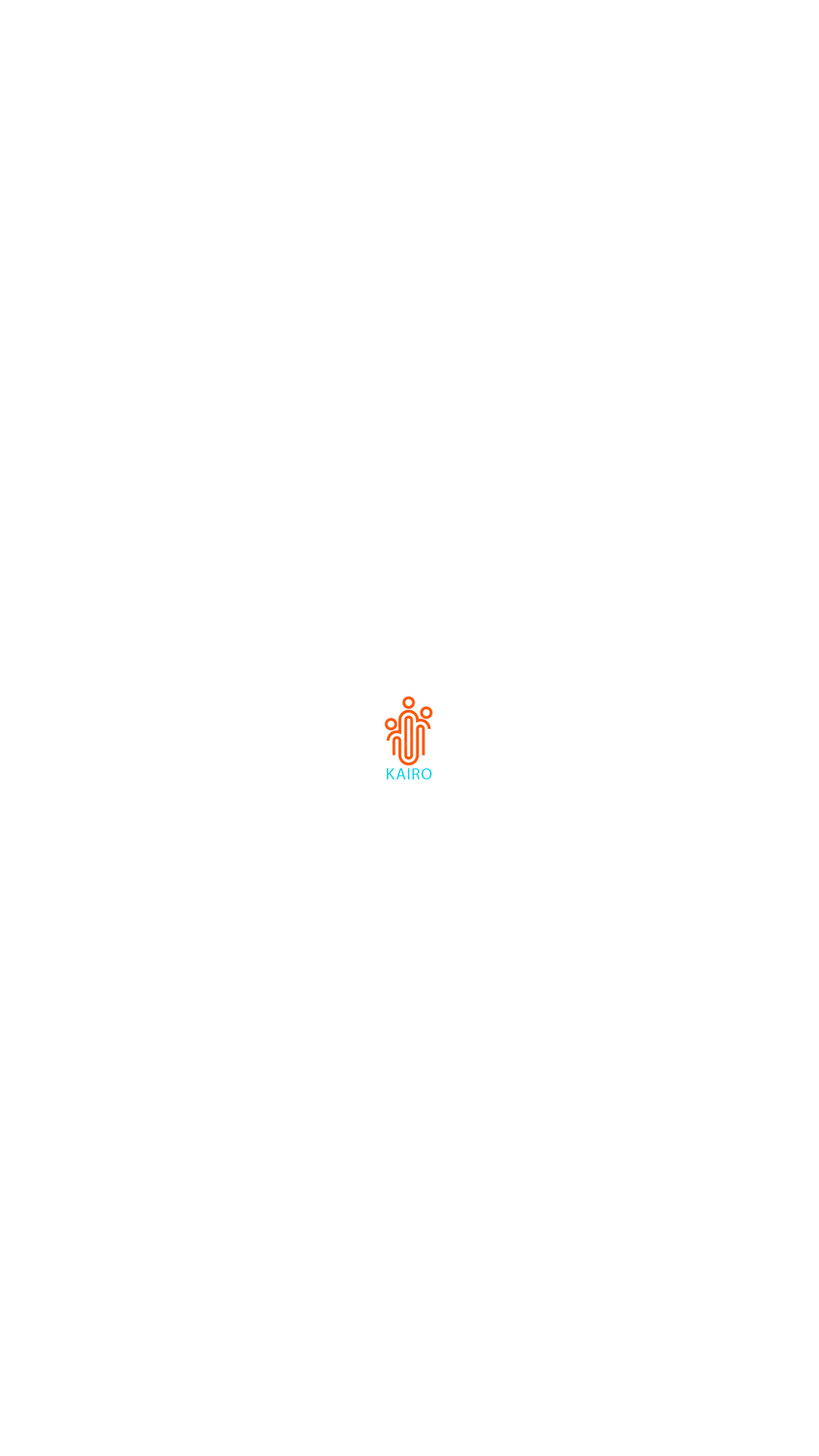
<style>
.page{position:relative;width:819px;height:1456px;background:#ffffff}
.page>*{position:absolute;margin:0}
.t1{font:16.7px "MyriadPro-Regular";letter-spacing:0.05em;color:#00d6e5}
</style>
<div class="page">
<p class="t1" style="left:387px;top:768px;width:45px;height:12px">KAIRO</p>
</div>
